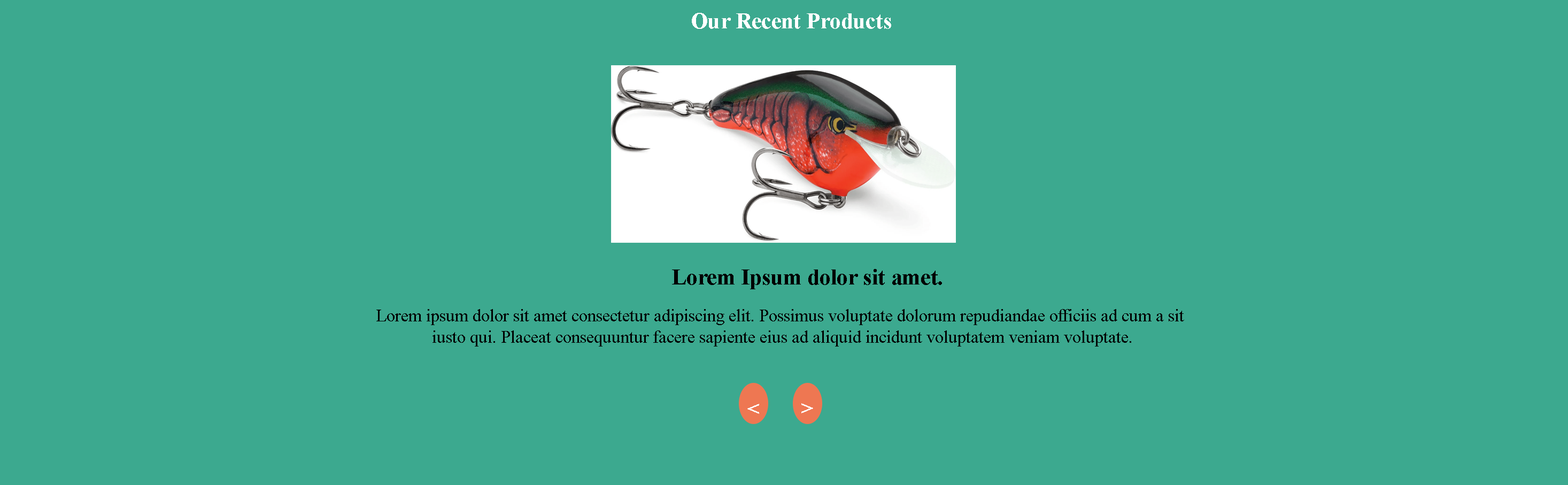
<style>
.page{position:relative;width:1568px;height:485px;background:#3ca98f}
.page>*{position:absolute;margin:0}
.t1{font:22.3px "TimesNewRomanPS-BoldMT";color:#ffffff}
.t2{font:22.3px "TimesNewRomanPS-BoldMT";color:#000000}
.t3{font:17.8px "TimesNewRomanPSMT";color:#000000}
</style>
<div class="page">
<p class="t1" style="left:692px;top:13px;width:199px;height:16px">Our Recent Products</p>
<p class="t2" style="left:672px;top:269px;width:270px;height:20px">Lorem Ipsum dolor sit amet.</p>
<p class="t3" style="left:376px;top:309px;width:808px;height:37px;text-align:center">Lorem ipsum dolor sit amet consectetur adipiscing elit. Possimus voluptate dolorum repudiandae officiis ad cum a sit <br>iusto qui. Placeat consequuntur facere sapiente eius ad aliquid incidunt voluptatem veniam voluptate.</p>
<p class="t1" style="left:747px;top:404px;width:12px;height:10px">&lt;</p>
<p class="t1" style="left:801px;top:403px;width:12px;height:10px">&gt;</p>
</div>
